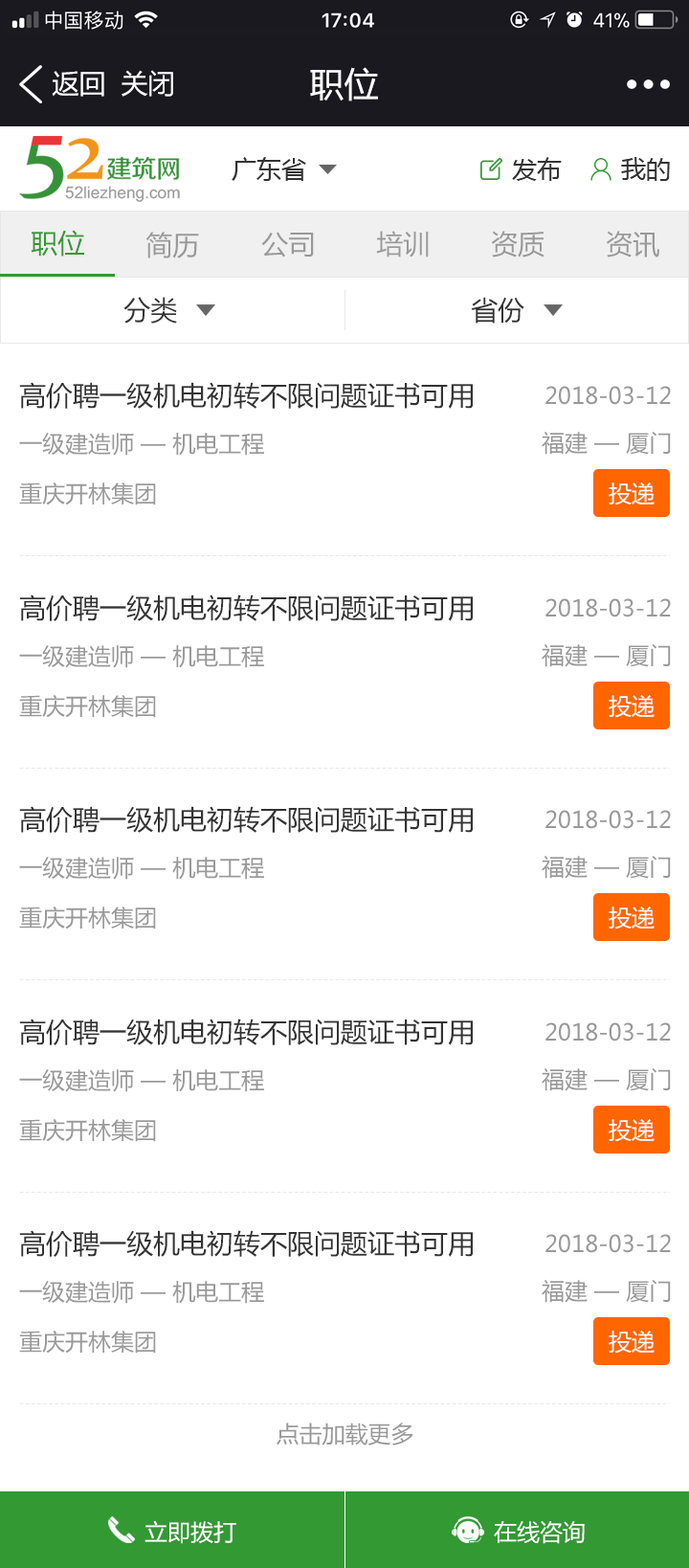
<style>
.page{position:relative;width:689px;height:1568px;background:#ffffff}
.page>*{position:absolute;margin:0}
.t1{font:26.8px "MicrosoftYaHei";color:#ffffff}
.t2{font:34.5px "MicrosoftYaHei";color:#ffffff}
.t3{font:24.9px "MicrosoftYaHei";color:#333333}
.t4{font:26.8px "MicrosoftYaHei";color:#339933}
.t5{font:26.8px "MicrosoftYaHei";color:#999999}
.t6{font:26.8px "MicrosoftYaHei";color:#333333}
.t7{font:23px "MicrosoftYaHei";color:#999999}
.t8{font:23px "MicrosoftYaHei";color:#ffffff}
</style>
<div class="page">
<p class="t1" style="left:52px;top:71px;width:52px;height:26px">返回</p>
<p class="t1" style="left:122px;top:70px;width:51px;height:27px">关闭</p>
<p class="t2" style="left:310px;top:67px;width:68px;height:34px">职位</p>
<p class="t3" style="left:232px;top:157px;width:74px;height:24px">广东省</p>
<p class="t3" style="left:512px;top:157px;width:50px;height:24px">发布</p>
<p class="t3" style="left:621px;top:157px;width:49px;height:24px">我的</p>
<p class="t4" style="left:31px;top:230px;width:53px;height:27px">职位</p>
<p class="t5" style="left:146px;top:232px;width:53px;height:26px">简历</p>
<p class="t5" style="left:261px;top:232px;width:53px;height:26px">公司</p>
<p class="t5" style="left:376px;top:231px;width:53px;height:27px">培训</p>
<p class="t5" style="left:491px;top:231px;width:54px;height:27px">资质</p>
<p class="t5" style="left:606px;top:231px;width:54px;height:27px">资讯</p>
<p class="t6" style="left:123px;top:297px;width:54px;height:27px">分类</p>
<p class="t6" style="left:471px;top:297px;width:54px;height:27px">省份</p>
<p class="t6" style="left:19px;top:382px;width:454px;height:27px">高价聘一级机电初转不限问题证书可用</p>
<p class="t7" style="left:546px;top:386px;width:125px;height:19px">2018-03-12</p>
<p class="t7" style="left:19px;top:433px;width:245px;height:23px">一级建造师 — 机电工程</p>
<p class="t7" style="left:542px;top:432px;width:129px;height:23px">福建 — 厦门</p>
<p class="t7" style="left:19px;top:482px;width:137px;height:23px">重庆开林集团</p>
<p class="t8" style="left:609px;top:482px;width:46px;height:23px">投递</p>
<p class="t6" style="left:19px;top:594px;width:454px;height:27px">高价聘一级机电初转不限问题证书可用</p>
<p class="t7" style="left:546px;top:598px;width:125px;height:19px">2018-03-12</p>
<p class="t7" style="left:19px;top:645px;width:245px;height:23px">一级建造师 — 机电工程</p>
<p class="t7" style="left:542px;top:644px;width:129px;height:23px">福建 — 厦门</p>
<p class="t7" style="left:19px;top:695px;width:137px;height:23px">重庆开林集团</p>
<p class="t8" style="left:609px;top:695px;width:46px;height:23px">投递</p>
<p class="t6" style="left:19px;top:806px;width:454px;height:27px">高价聘一级机电初转不限问题证书可用</p>
<p class="t7" style="left:546px;top:810px;width:125px;height:19px">2018-03-12</p>
<p class="t7" style="left:19px;top:857px;width:245px;height:23px">一级建造师 — 机电工程</p>
<p class="t7" style="left:542px;top:856px;width:129px;height:23px">福建 — 厦门</p>
<p class="t7" style="left:19px;top:907px;width:137px;height:23px">重庆开林集团</p>
<p class="t8" style="left:609px;top:907px;width:46px;height:23px">投递</p>
<p class="t6" style="left:19px;top:1019px;width:454px;height:26px">高价聘一级机电初转不限问题证书可用</p>
<p class="t7" style="left:546px;top:1022px;width:125px;height:20px">2018-03-12</p>
<p class="t7" style="left:19px;top:1069px;width:245px;height:23px">一级建造师 — 机电工程</p>
<p class="t7" style="left:542px;top:1068px;width:129px;height:23px">福建 — 厦门</p>
<p class="t7" style="left:19px;top:1119px;width:137px;height:23px">重庆开林集团</p>
<p class="t8" style="left:609px;top:1119px;width:46px;height:23px">投递</p>
<p class="t6" style="left:19px;top:1230px;width:454px;height:27px">高价聘一级机电初转不限问题证书可用</p>
<p class="t7" style="left:546px;top:1234px;width:125px;height:19px">2018-03-12</p>
<p class="t7" style="left:19px;top:1281px;width:245px;height:23px">一级建造师 — 机电工程</p>
<p class="t7" style="left:542px;top:1280px;width:129px;height:23px">福建 — 厦门</p>
<p class="t7" style="left:19px;top:1331px;width:137px;height:23px">重庆开林集团</p>
<p class="t8" style="left:609px;top:1331px;width:46px;height:23px">投递</p>
<p class="t7" style="left:277px;top:1422px;width:136px;height:23px">点击加载更多</p>
<p class="t8" style="left:145px;top:1520px;width:91px;height:24px">立即拨打</p>
<p class="t8" style="left:494px;top:1521px;width:91px;height:23px">在线咨询</p>
</div>
